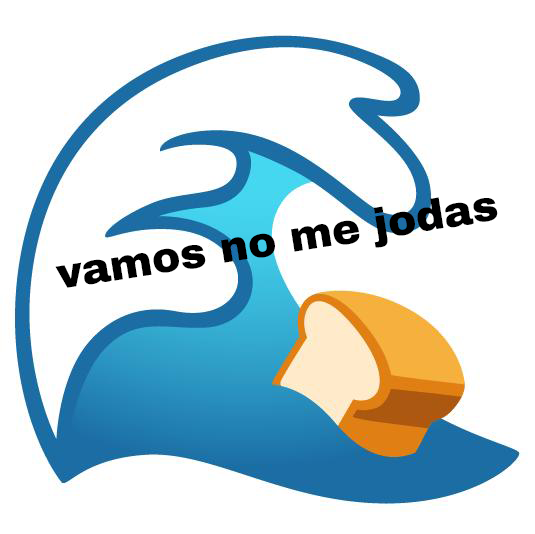
<style>
.page{position:relative;width:535px;height:534px;background:#ffffff}
.page>*{position:absolute;margin:0}
.t1{font:42.5px "ArchivoBlack-Regular";color:#000000}
</style>
<div class="page">
<p class="t1" style="left:55px;top:197px;width:443px;height:91px;rotate:-9deg">vamos no me jodas</p>
</div>
